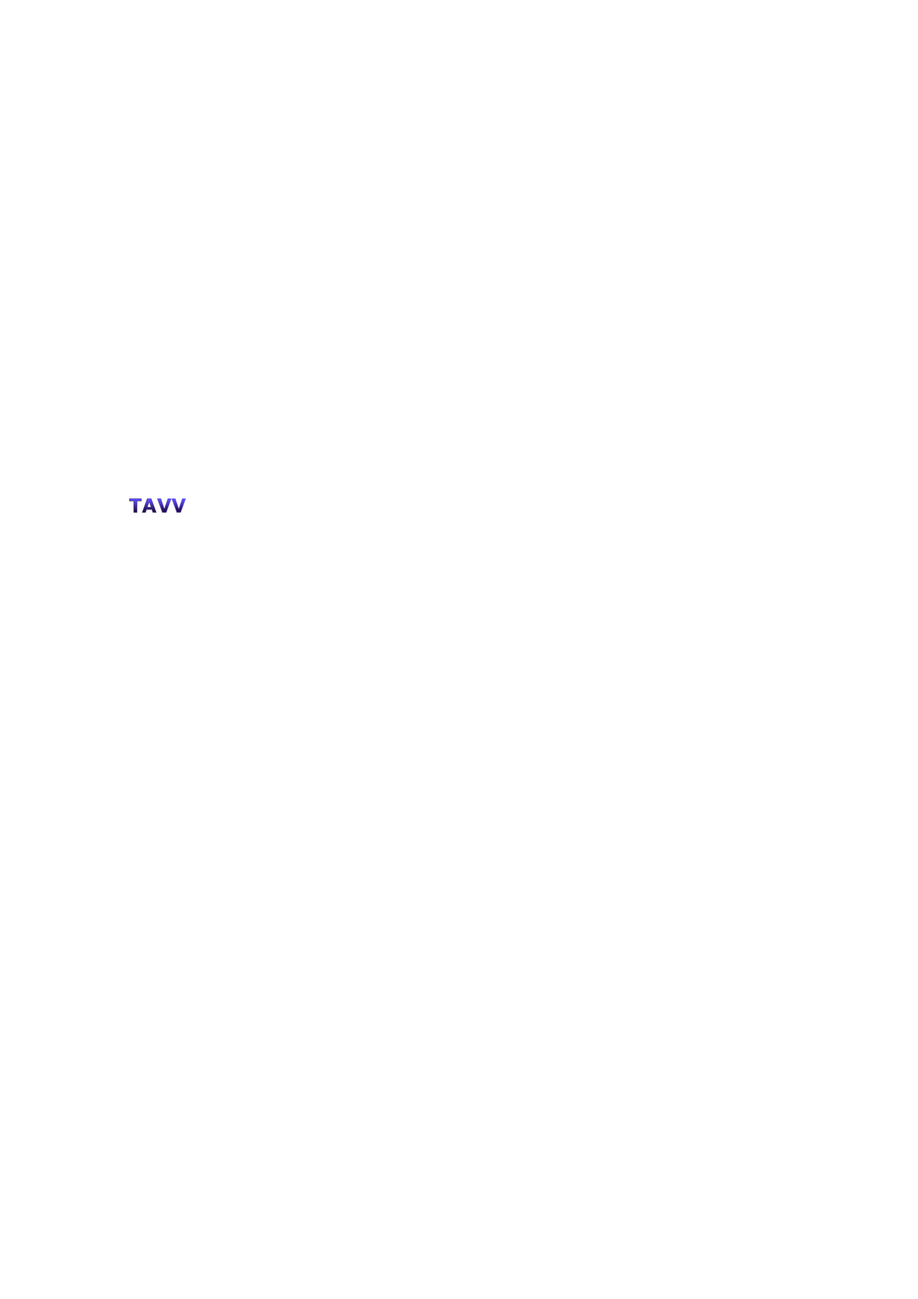
<style>
.page{position:relative;width:918px;height:1299px;background:#ffffff}
.page>*{position:absolute;margin:0}
.t1{font:19.2px "Verdana-Bold"}
</style>
<div class="page">
<p class="t1" style="left:129px;top:498px;width:57px;height:14px">TAVV</p>
</div>
